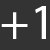
<style>
.page{position:relative;width:50px;height:50px;background:#333333}
.page>*{position:absolute;margin:0}
.t1{font:12px "MyriadPro-Regular";color:#ffffff}
</style>
<div class="page">
<p class="t1" style="left:1px;top:6px;width:45px;height:33px">+1</p>
</div>
